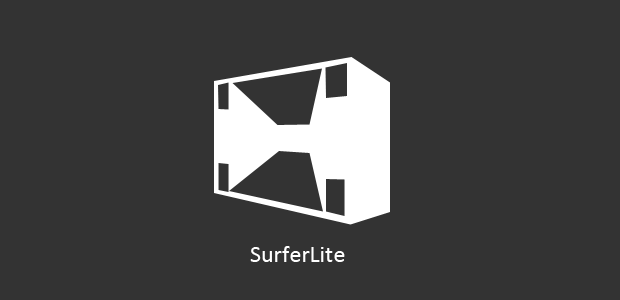
<style>
.page{position:relative;width:620px;height:300px;background:#333333}
.page>*{position:absolute;margin:0}
.t1{font:24px "Calibri";color:#ffffff}
</style>
<div class="page">
<p class="t1" style="left:250px;top:246px;width:95px;height:16px">SurferLite</p>
</div>
